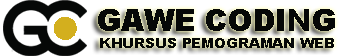
<style>
.page{position:relative;width:350px;height:56px;background:#060807}
.page>*{position:absolute;margin:0}
.t1{font:13.8px "Arial-Black";letter-spacing:-0.01em;color:#060807;text-transform:uppercase}
.t2{font:29.8px "Arial-Black";letter-spacing:-0.01em;color:#060807;text-transform:uppercase}
</style>
<div class="page">
<p class="t1" style="left:98px;top:9px;width:237px;height:39px;text-align:center"><span class="t2">gawe coding<br></span>khursus pemograman web</p>
</div>
